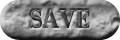
<style>
.page{position:relative;width:120px;height:40px}
.page>*{position:absolute;margin:0}
.t1{font:24px "MyungjoXB-HM"}
</style>
<div class="page">
<p class="t1" style="left:30px;top:9px;width:60px;height:19px">SAVE</p>
</div>
